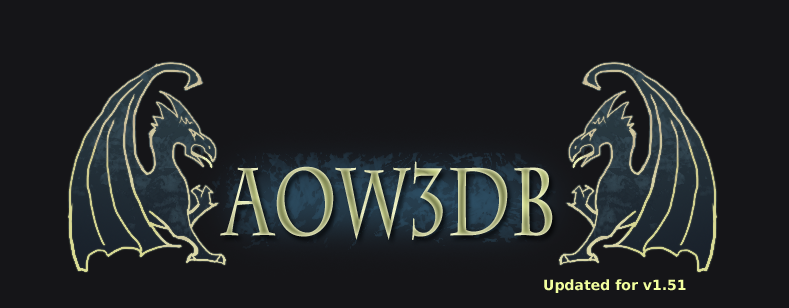
<style>
.page{position:relative;width:789px;height:308px;background:#151518}
.page>*{position:absolute;margin:0}
.t1{font:95.5px "CharlemagneStd-Bold";scale:0.71 1}
.t2{font:14px "DejaVuSans-Bold";color:#f2ff9e}
</style>
<div class="page">
<p class="t1" style="left:220px;top:161px;width:333px;height:79px">AOW3DB</p>
<p class="t2" style="left:544px;top:279px;width:142px;height:14px">Updated for v1.51</p>
</div>
